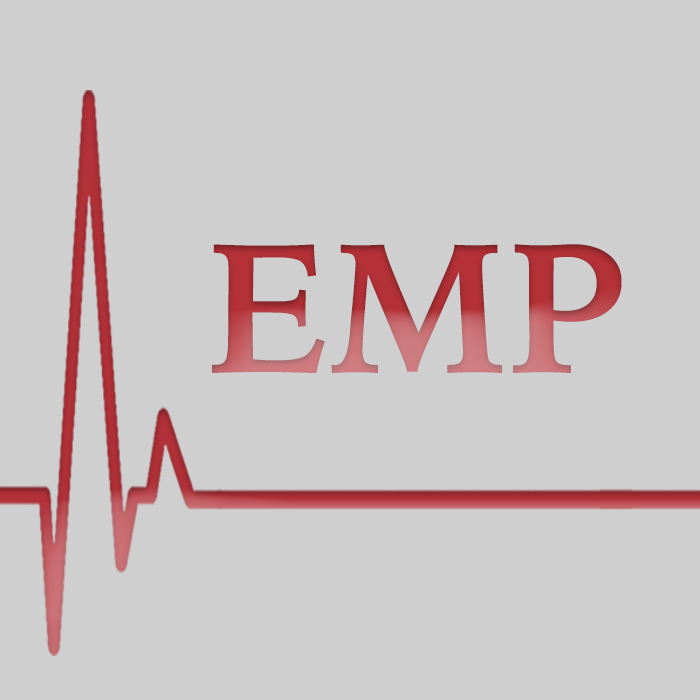
<style>
.page{position:relative;width:700px;height:700px;background:#d0cfcf}
.page>*{position:absolute;margin:0}
.t1{font:184px "IowanOldStyle-Bold";letter-spacing:0.005em}
</style>
<div class="page">
<p class="t1" style="left:212px;top:244px;width:410px;height:129px">EMP</p>
</div>
